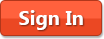
<style>
.page{position:relative;width:104px;height:39px;background:#ff613d}
.page>*{position:absolute;margin:0}
.t1{font:20px "SegoeUI-Bold";color:#ffffff}
</style>
<div class="page">
<p class="t1" style="left:19px;top:10px;width:64px;height:20px">Sign In</p>
</div>
